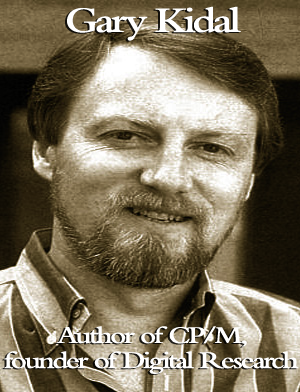
<style>
.page{position:relative;width:300px;height:392px}
.page>*{position:absolute;margin:0}
.t1{font:37.6px "BemboMT-SemiBold";letter-spacing:-0.08em;color:#ffffff;scale:1.21 1}
.t2{font:25px/25px "BemboMT-SemiBold";letter-spacing:-0.08em;color:#ffffff;scale:1.21 1}
</style>
<div class="page">
<p class="t1" style="left:67px;top:6px;width:174px;height:35px">Gary Kidal</p>
<p class="t2" style="left:4px;top:326px;width:295px;height:48px;text-align:center">Author of CP/M,<br>founder of Digital Research</p>
</div>
